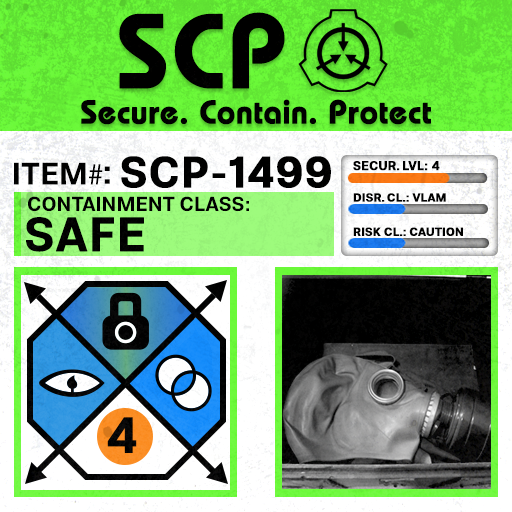
<style>
.page{position:relative;width:512px;height:512px}
.page>*{position:absolute;margin:0}
.t1{font:105.8px "BauhausLT-Demi";color:#000000;font-weight:bold}
.t2{font:33px "BauhausLT-Demi";color:#000000;font-weight:bold}
.t3{font:43.7px "Molde-Semibold";color:#000000;font-weight:bold}
.t4{font:12.5px "Molde-Semibold";color:#000000;font-weight:bold}
.t5{font:31.1px "Molde-Semibold";color:#000000}
.t6{font:31.1px "MyriadPro-Regular";color:#000000}
.t7{font:34.5px "Molde-Semibold";color:#000000}
.t8{font:20.3px "Molde-Semibold";color:#000000}
.t9{font:11.7px "Molde-Semibold";color:#000000;font-weight:bold}
.t10{font:47.8px "Molde-Semibold";color:#000000;font-weight:bold}
</style>
<div class="page">
<p class="t1" style="left:119px;top:12px;width:166px;height:77px">SCP</p>
<p class="t2" style="left:81px;top:99px;width:350px;height:26px">Secure. Contain. Protect</p>
<p class="t3" style="left:121px;top:156px;width:210px;height:32px">SCP-1499</p>
<p class="t4" style="left:353px;top:161px;width:87px;height:10px">SECUR. LVL: 4</p>
<p class="t5" style="left:14px;top:162px;width:89px;height:23px">ITEM<span class="t6">#</span></p>
<p class="t7" style="left:104px;top:166px;width:6px;height:18px">:</p>
<p class="t8" style="left:28px;top:196px;width:221px;height:16px">CONTAINMENT CLASS:</p>
<p class="t9" style="left:353px;top:193px;width:93px;height:9px">DISR. CL.: VLAM</p>
<p class="t10" style="left:26px;top:217px;width:118px;height:35px">SAFE</p>
<p class="t9" style="left:353px;top:227px;width:110px;height:9px">RISK CL.: CAUTION</p>
</div>
